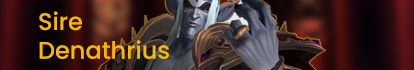
<style>
.page{position:relative;width:414px;height:70px}
.page>*{position:absolute;margin:0}
.t1{font:24px "Poppins-Medium";color:#f8b700}
</style>
<div class="page">
<p class="t1" style="left:39px;top:11px;width:130px;height:48px">Sire <br>Denathrius</p>
</div>
